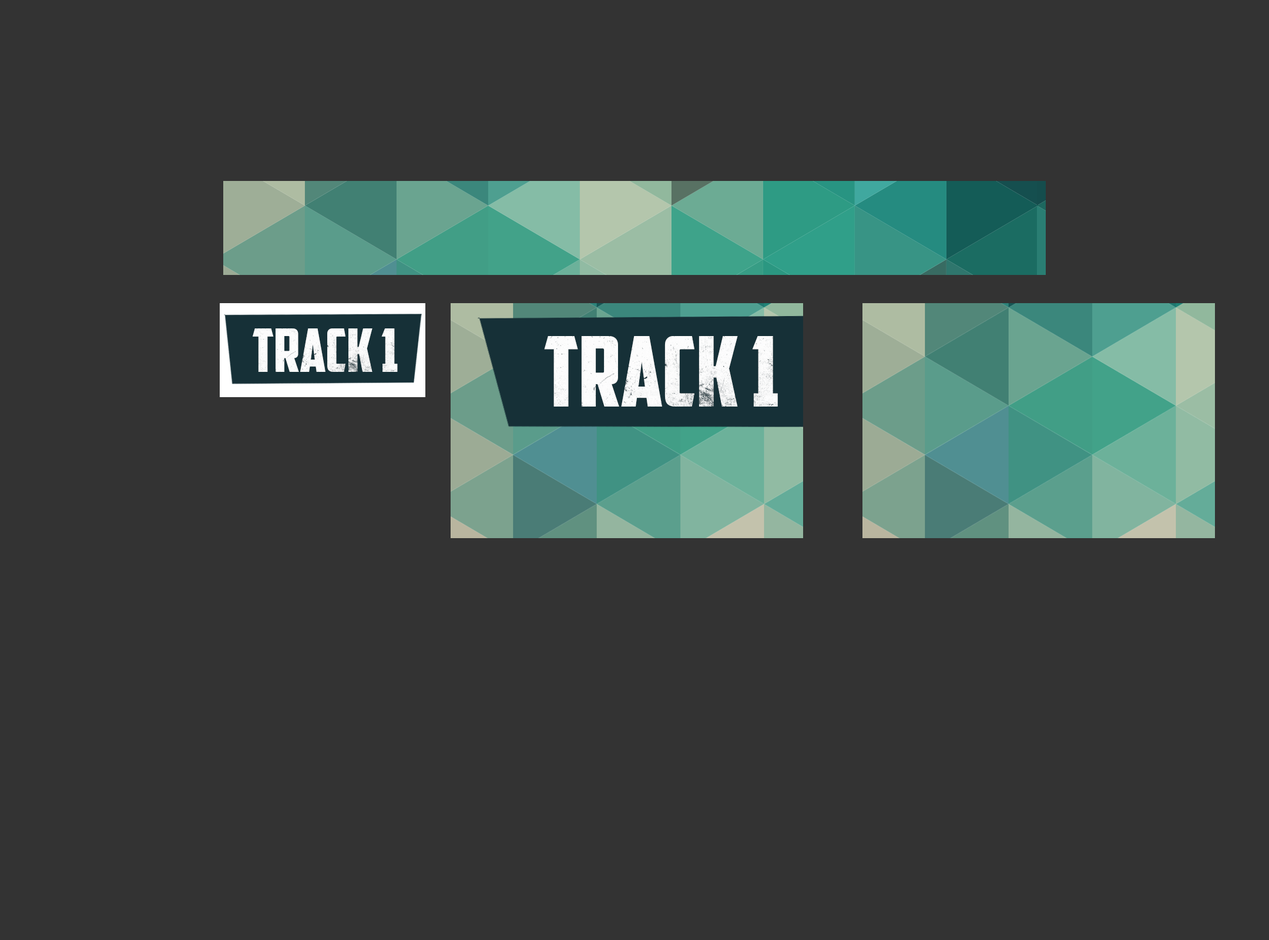
<style>
.page{position:relative;width:1269px;height:940px;background:#333333}
.page>*{position:absolute;margin:0}
.t1{font:60.2px "AmericanCaptain";color:#ffffff}
.t2{font:97.5px "AmericanCaptain";color:#ffffff}
</style>
<div class="page">
<p class="t1" style="left:253px;top:328px;width:145px;height:44px">Track 1</p>
<p class="t2" style="left:544px;top:336px;width:234px;height:70px">Track 1</p>
</div>
